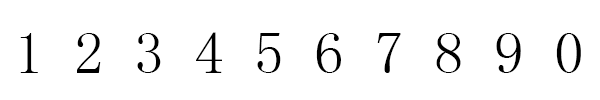
<style>
.page{position:relative;width:600px;height:100px;background:#ffffff}
.page>*{position:absolute;margin:0}
.t1{font:60px "SimSun";color:#000000}
</style>
<div class="page">
<p class="t1" style="left:20px;top:32px;width:561px;height:41px">1 2 3 4 5 6 7 8 9 0</p>
</div>
